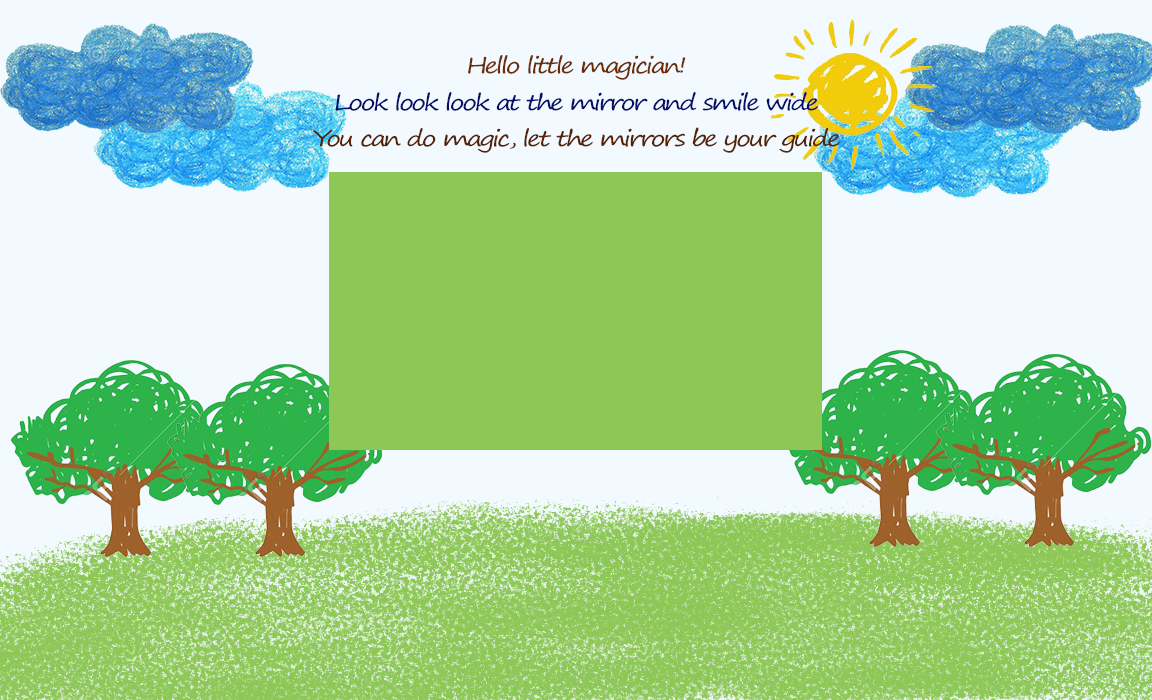
<style>
.page{position:relative;width:1152px;height:700px;background:#f2faff}
.page>*{position:absolute;margin:0}
.t1{font:21.8px/36.4px "SegoePrint";letter-spacing:-0.1em;color:#562203;scale:1.22 1}
.t2{font:21.8px/36.4px "SegoePrint";letter-spacing:-0.1em;color:#6c2c05;scale:1.22 1}
.t3{font:21.8px/36.4px "SegoePrint";letter-spacing:-0.1em;color:#050f6c;scale:1.22 1}
</style>
<div class="page">
<p class="t1" style="left:313px;top:55px;width:527px;height:98px;text-align:center"><span class="t2">Hello little magician!<br></span><span class="t3">Look look look at the mirror and smile wide<br></span>You can do magic, let the mirrors be your guide</p>
</div>
